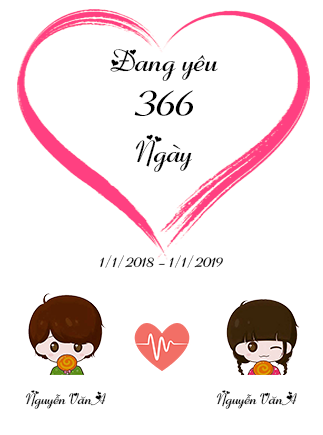
<style>
.page{position:relative;width:323px;height:435px;background:#ffffff}
.page>*{position:absolute;margin:0}
.t1{font:30px "fiolexgirl";color:#000000}
.t2{font:40px "fiolexgirl";color:#000000}
.t3{font:15px "fiolexgirl";color:#000000}
</style>
<div class="page">
<p class="t1" style="left:110px;top:49px;width:108px;height:32px">Đang yêu</p>
<p class="t2" style="left:134px;top:90px;width:59px;height:26px">366</p>
<p class="t1" style="left:135px;top:134px;width:57px;height:38px">Ngày</p>
<p class="t3" style="left:100px;top:255px;width:123px;height:13px">1/1/2018 - 1/1/2019</p>
<p class="t3" style="left:25px;top:390px;width:81px;height:19px">Nguyễn Văn A</p>
<p class="t3" style="left:216px;top:390px;width:81px;height:19px">Nguyễn Văn A</p>
</div>
